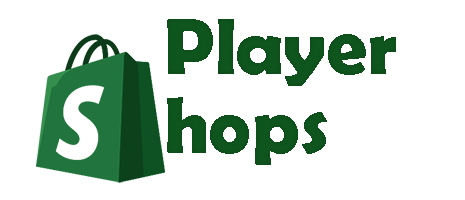
<style>
.page{position:relative;width:465px;height:200px;background:#ffffff}
.page>*{position:absolute;margin:0}
.t1{font:80px "BerlinSansFBDemi-Bold";color:#004b10}
</style>
<div class="page">
<p class="t1" style="left:167px;top:19px;width:229px;height:67px">Player</p>
<p class="t1" style="left:167px;top:97px;width:160px;height:68px">hops</p>
</div>
